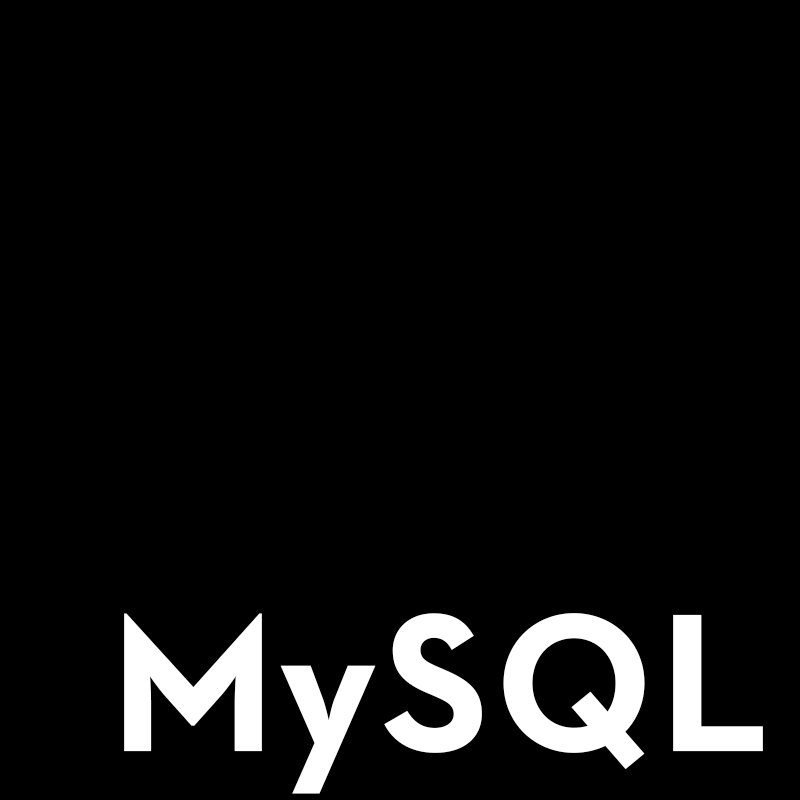
<style>
.page{position:relative;width:800px;height:800px;background:#000000}
.page>*{position:absolute;margin:0}
.t1{font:200px "NeutraText-Bold";letter-spacing:0.025em;color:#ffffff}
</style>
<div class="page">
<p class="t1" style="left:124px;top:613px;width:639px;height:181px">MySQL</p>
</div>
